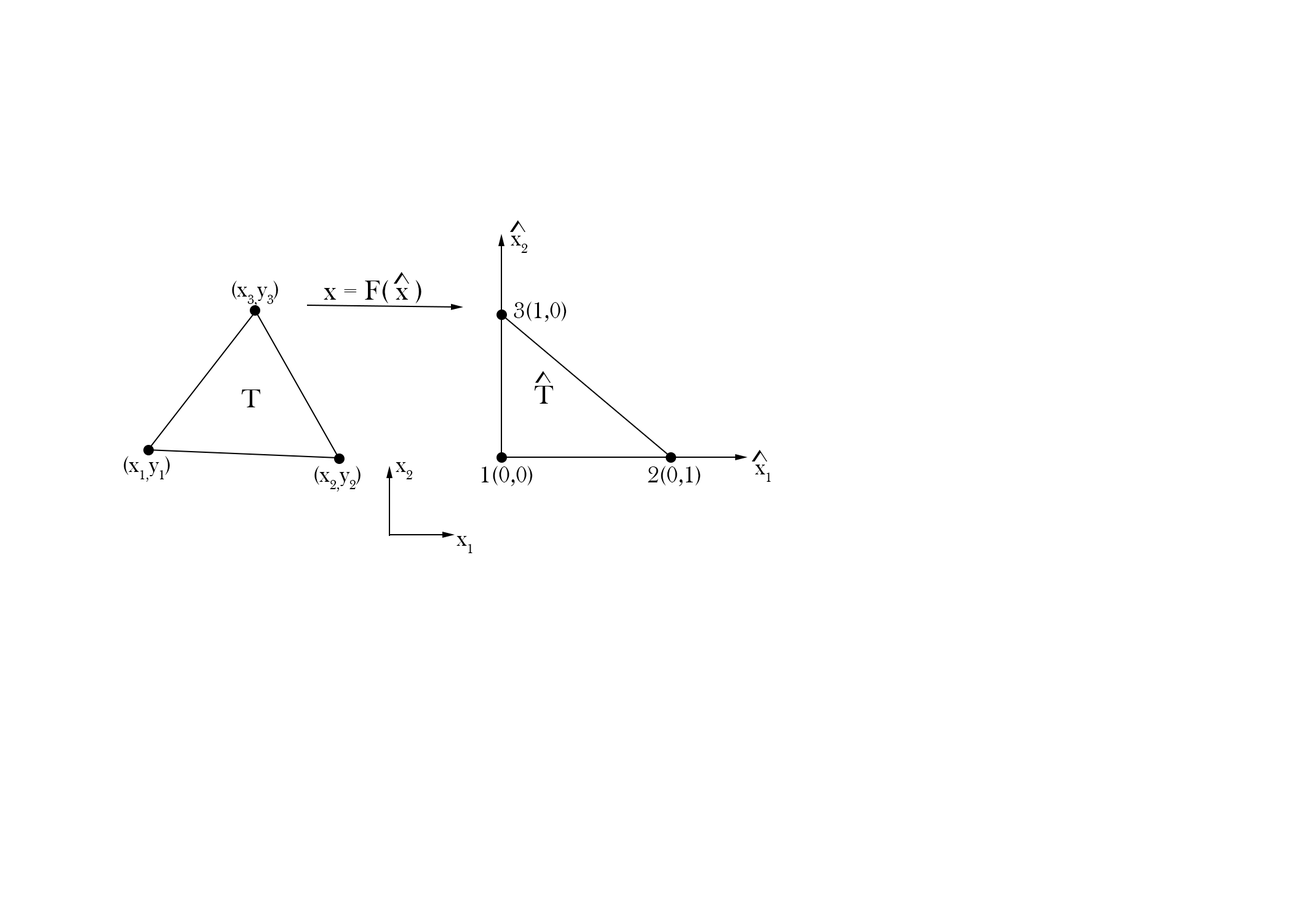
<style>
.page{position:relative;width:1292px;height:923px;background:#ffffff}
.page>*{position:absolute;margin:0}
.t1{font:48.7px "BaskOldFace";color:#000000}
.t2{font:23.1px "BaskOldFace";color:#000000}
.t3{font:41px "BaskOldFace";color:#000000}
.t4{font:46.1px "BaskOldFace";color:#000000}
</style>
<div class="page">
<p class="t1" style="left:510px;top:220px;width:15px;height:12px">^</p>
<p class="t2" style="left:511px;top:236px;width:17px;height:17px">x2<br> "Postmodernism", au Victoria &amp; Albert Museum</p>
<p class="t2" style="left:232px;top:281px;width:46px;height:25px">(x3,y3) ?x1"Postmodernism", au Victoria &amp; Albert Museum</p>
<p class="t1" style="left:324px;top:280px;width:97px;height:23px">x = F( x )</p>
<p class="t1" style="left:394px;top:272px;width:15px;height:12px">^</p>
<p class="t3" style="left:514px;top:301px;width:53px;height:21px">3(1,0)</p>
<p class="t1" style="left:535px;top:371px;width:16px;height:12px">^</p>
<p class="t4" style="left:241px;top:389px;width:20px;height:18px">T</p>
<p class="t4" style="left:535px;top:386px;width:19px;height:18px">T</p>
<p class="t1" style="left:752px;top:450px;width:15px;height:11px">^</p>
<p class="t2" style="left:124px;top:456px;width:46px;height:26px">(x1,y1) ?x1"Postmodernism", au Victoria &amp; Albert Museum</p>
<p class="t2" style="left:314px;top:466px;width:47px;height:26px">(x2,y2) ?x1"Postmodernism", au Victoria &amp; Albert Museum</p>
<p class="t2" style="left:396px;top:462px;width:17px;height:17px">x2<br> "Postmodernism", au Victoria &amp; Albert Museum</p>
<p class="t3" style="left:482px;top:466px;width:51px;height:20px">1(0,0)</p>
<p class="t3" style="left:648px;top:466px;width:53px;height:20px">2(0,1)</p>
<p class="t2" style="left:755px;top:465px;width:16px;height:17px">x1 "Postmodernism", au Victoria &amp; Albert Museum</p>
<p class="t2" style="left:457px;top:536px;width:16px;height:17px">x1 ?x1"Postmodernism", au Victoria &amp; Albert Museum</p>
</div>
